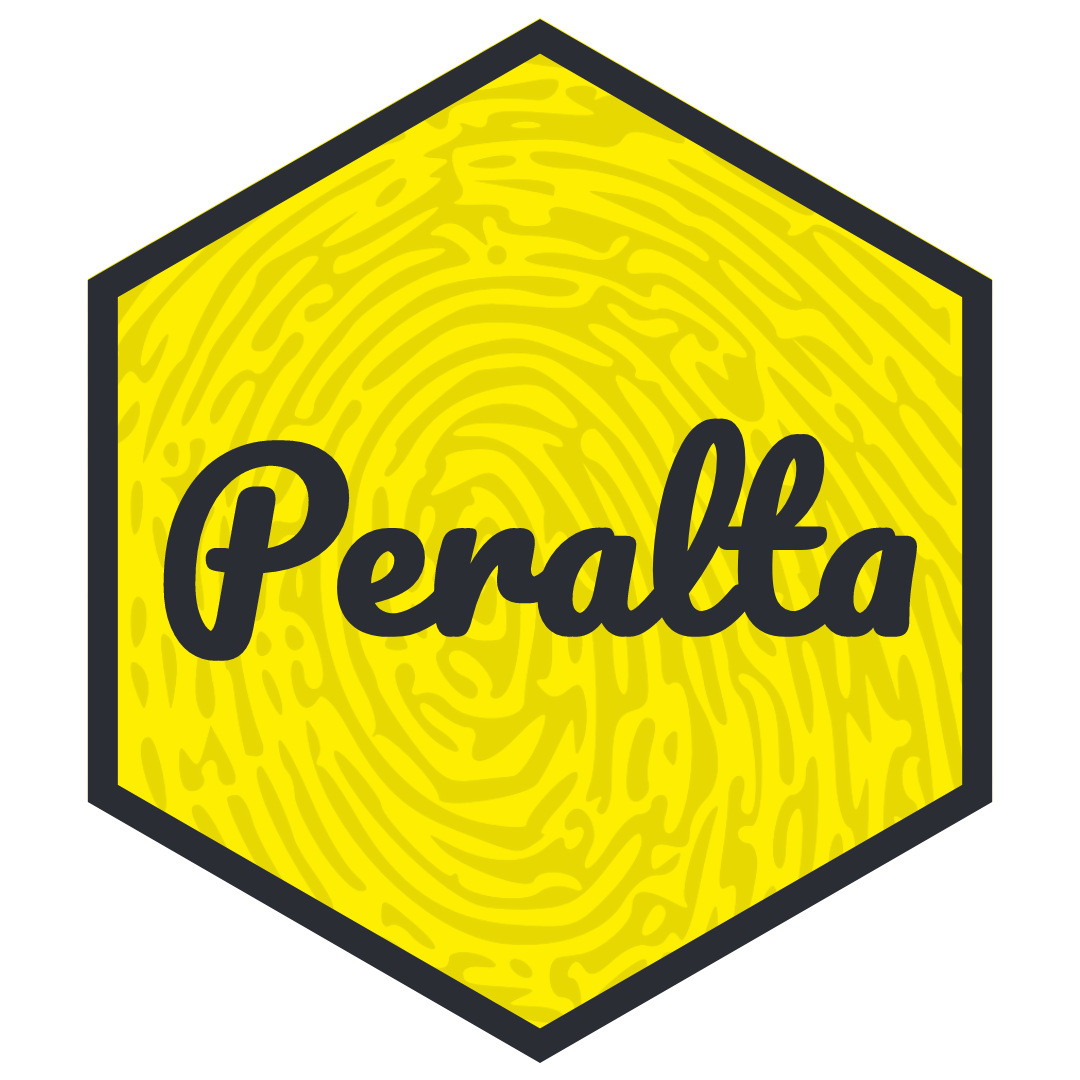
<style>
.page{position:relative;width:1080px;height:1080px;background:#ffffff}
.page>*{position:absolute;margin:0}
.t1{font:231px "Pacifico-Regular";color:#2b2d35;font-weight:bold}
</style>
<div class="page">
<p class="t1" style="left:163px;top:418px;width:754px;height:243px">Peralta</p>
</div>
